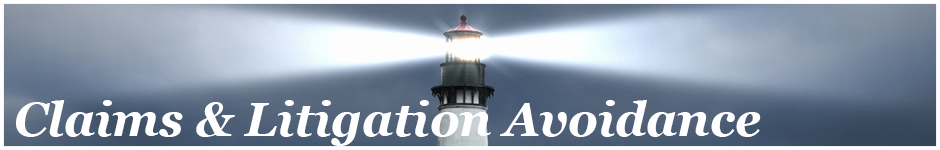
<style>
.page{position:relative;width:940px;height:150px}
.page>*{position:absolute;margin:0}
.t1{font:47px "Georgia-BoldItalic";color:#ffffff}
</style>
<div class="page">
<p class="t1" style="left:16px;top:100px;width:745px;height:46px">Claims &amp; Litigation Avoidance</p>
</div>
